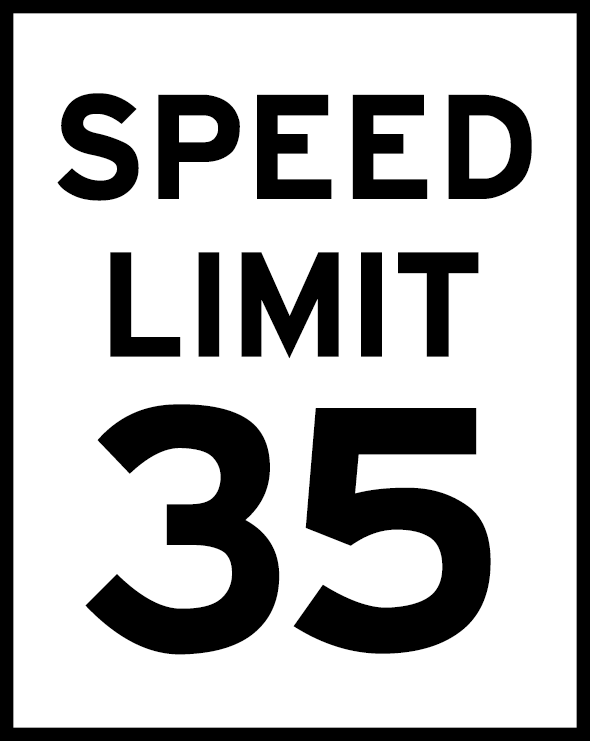
<style>
.page{position:relative;width:590px;height:741px;background:#ffffff}
.page>*{position:absolute;margin:0}
.t1{font:157.7px/157.7px "HittheRoad";color:#000000}
.t2{font:365px "HittheRoad";color:#000000}
</style>
<div class="page">
<p class="t1" style="left:57px;top:93px;width:475px;height:266px;text-align:center">SPEED<br>LIMIT</p>
<p class="t2" style="left:85px;top:404px;width:406px;height:251px">35</p>
</div>
